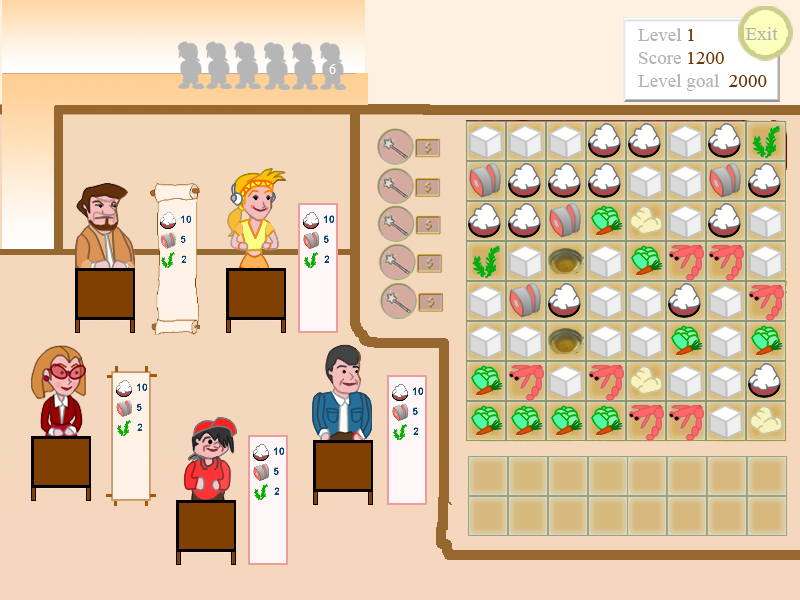
<style>
.page{position:relative;width:800px;height:600px;background:#f4d7bc}
.page>*{position:absolute;margin:0}
.t1{font:19.1px "TimesNewRomanPSMT";color:#b3b3b3}
.t2{font:19.1px "TimesNewRomanPSMT";color:#b2b2b2}
.t3{font:19.1px "TimesNewRomanPSMT";color:#633200}
.t4{font:19.1px "TimesNewRomanPSMT";color:#6c3600}
.t5{font:14px "TimesNewRomanPSMT";color:#ffffff}
</style>
<div class="page">
<p class="t1" style="left:638px;top:28px;width:129px;height:63px"><span class="t2">Level </span><span class="t3">1<br></span>Score <span class="t4">1200<br></span>Level goal  <span class="t3">2000</span></p>
<p class="t2" style="left:745px;top:27px;width:33px;height:13px">Exit</p>
<p class="t5" style="left:329px;top:64px;width:7px;height:10px">6</p>
</div>
